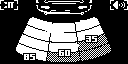
<style>
.page{position:relative;width:128px;height:64px;background:#000000}
.page>*{position:absolute;margin:0}
.t1{font:16px "Gamer";color:#ffffff}
</style>
<div class="page">
<p class="t1" style="left:2px;top:2px;width:14px;height:6px">cm</p>
<p class="t1" style="left:86px;top:36px;width:11px;height:6px">35</p>
<p class="t1" style="left:24px;top:54px;width:11px;height:6px">85</p>
<p class="t1" style="left:59px;top:50px;width:11px;height:6px">60</p>
</div>
